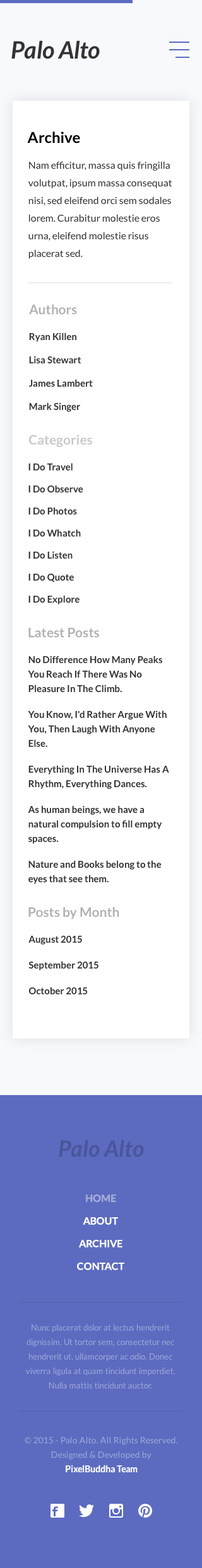
<style>
.page{position:relative;width:202px;height:1568px;background:#ffffff}
.page>*{position:absolute;margin:0}
.t1{font:23.9px "Lato-BoldItalic";color:#333333}
.t2{font:15.1px "Lato-Bold";color:#000000}
.t3{font:10.1px/17.6px "Lato-Regular";color:#333333}
.t4{font:13.2px "Lato-Bold";color:#b2b2b2}
.t5{font:9.4px "Lato-Bold";color:#333333}
.t6{font:13.2px "Lato-Bold";color:#c9c9c9}
.t7{font:9.4px/14.5px "Lato-Bold";color:#333333}
.t8{font:22.7px "Lato-BoldItalic";color:#4a569a}
.t9{font:10.1px "Lato-Bold";color:#a9afdb;text-transform:uppercase}
.t10{font:10.1px/22.7px "Lato-Bold";color:#ffffff;text-transform:uppercase}
.t11{font:8.2px/14.5px "Lato-Regular";color:#9da6d9}
.t12{font:8.8px/14.5px "Lato-Regular"}
.t13{font:8.8px/14.5px "Lato-Bold"}
.t14{font:8.8px "Lato-Bold";color:#ffffff}
</style>
<div class="page">
<p class="t1" style="left:11px;top:40px;width:88px;height:19px">Palo Alto</p>
<p class="t2" style="left:27px;top:132px;width:53px;height:12px">Archive</p>
<p class="t3" style="left:28px;top:161px;width:144px;height:98px">Nam efficitur, massa quis fringilla volutpat, ipsum massa consequat nisi, sed eleifend orci sem sodales lorem. Curabitur molestie eros urna, eleifend molestie risus placerat sed.</p>
<p class="t4" style="left:29px;top:304px;width:48px;height:11px">Authors</p>
<p class="t5" style="left:29px;top:332px;width:47px;height:10px">Ryan Killen</p>
<p class="t5" style="left:29px;top:356px;width:52px;height:8px">Lisa Stewart</p>
<p class="t5" style="left:29px;top:379px;width:64px;height:8px">James Lambert</p>
<p class="t5" style="left:29px;top:402px;width:51px;height:10px">Mark Singer</p>
<p class="t6" style="left:28px;top:435px;width:64px;height:12px">Categories</p>
<p class="t5" style="left:28px;top:463px;width:44px;height:8px">I Do Travel</p>
<p class="t5" style="left:28px;top:485px;width:55px;height:8px">I Do Observe</p>
<p class="t5" style="left:28px;top:507px;width:49px;height:8px">I Do Photos</p>
<p class="t5" style="left:28px;top:529px;width:53px;height:8px">I Do Whatch</p>
<p class="t5" style="left:28px;top:551px;width:44px;height:8px">I Do Listen</p>
<p class="t5" style="left:28px;top:573px;width:46px;height:9px">I Do Quote</p>
<p class="t5" style="left:28px;top:595px;width:51px;height:10px">I Do Explore</p>
<p class="t4" style="left:28px;top:627px;width:71px;height:11px">Latest Posts</p>
<p class="t7" style="left:28px;top:656px;width:134px;height:37px">No Difference How Many Peaks You Reach If There Was No Pleasure In The Climb.</p>
<p class="t7" style="left:28px;top:710px;width:138px;height:37px">You Know, I'd Rather Argue With You, Then Laugh With Anyone Else.</p>
<p class="t7" style="left:28px;top:765px;width:141px;height:24px">Everything In The Universe Has A Rhythm, Everything Dances.</p>
<p class="t7" style="left:28px;top:805px;width:134px;height:39px">As human beings, we have a natural compulsion to fill empty spaces.</p>
<p class="t7" style="left:28px;top:860px;width:133px;height:24px">Nature and Books belong to the eyes that see them.</p>
<p class="t4" style="left:28px;top:907px;width:91px;height:12px">Posts by Month</p>
<p class="t5" style="left:28px;top:935px;width:54px;height:10px">August 2015</p>
<p class="t5" style="left:28px;top:961px;width:70px;height:9px">September 2015</p>
<p class="t5" style="left:28px;top:987px;width:60px;height:8px">October 2015</p>
<p class="t8" style="left:59px;top:1140px;width:85px;height:17px">Palo Alto</p>
<p class="t9" style="left:86px;top:1194px;width:30px;height:8px">home</p>
<p class="t10" style="left:77px;top:1217px;width:47px;height:53px;text-align:center">about<br>archive<br>contact</p>
<p class="t11" style="left:25px;top:1324px;width:149px;height:65px;text-align:center">Nunc placerat dolor at lectus hendrerit dignissim. Ut tortor sem, consectetur nec hendrerit ut, ullamcorper ac odio. Donec viverra ligula at quam tincidunt imperdiet. Nulla mattis tincidunt auctor.</p>
<p class="t12" style="left:25px;top:1436px;width:152px;height:37px;text-align:center">© 2015 - Palo Alto. All Rights Reserved. Designed &amp; Developed by <br><span class="t13">PixelBuddha Team</span></p>
<p class="t14" style="left:65px;top:1465px;width:72px;height:8px">PixelBuddha Team</p>
</div>
